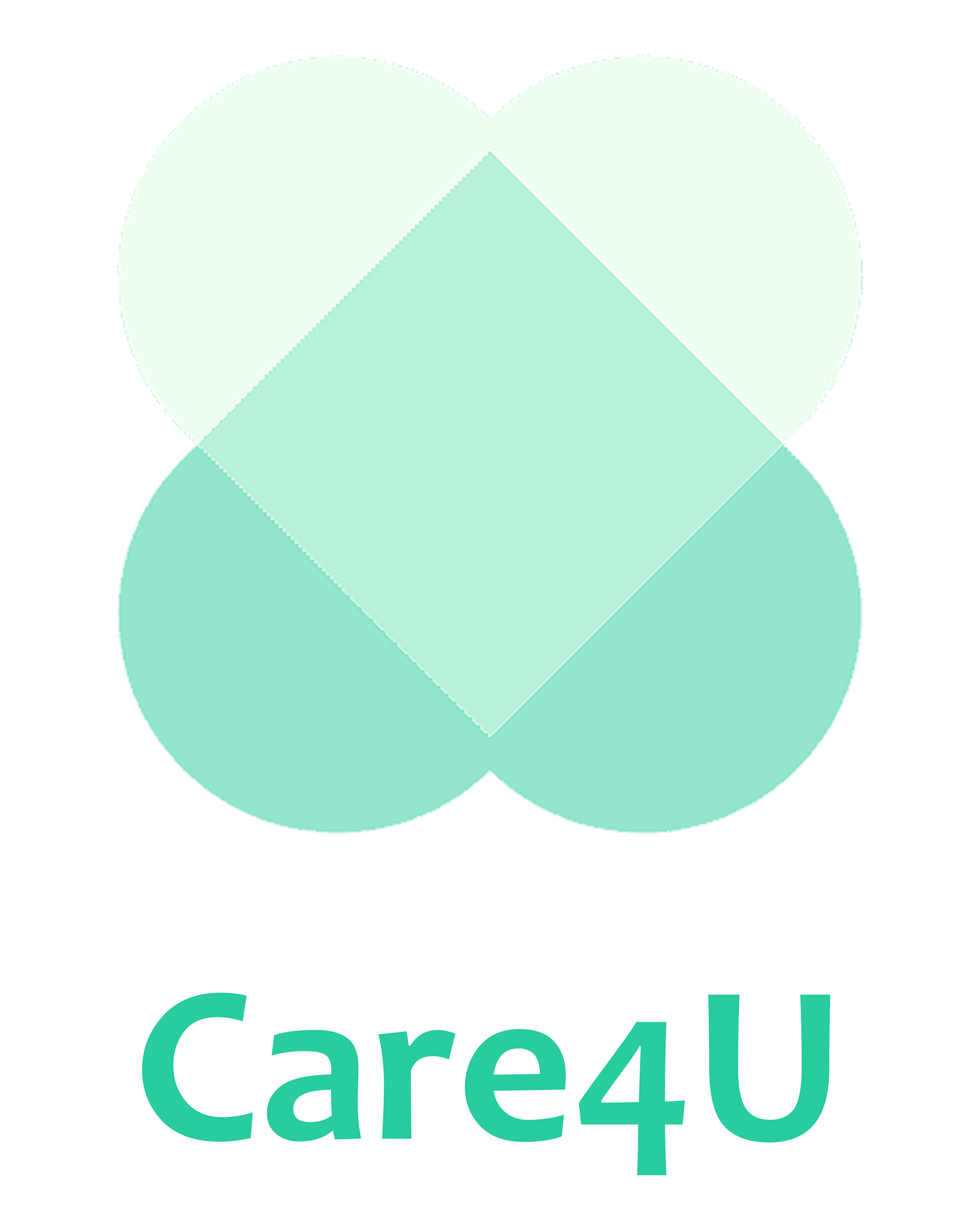
<style>
.page{position:relative;width:975px;height:1223px;background:#ffffff}
.page>*{position:absolute;margin:0}
.t1{font:226.4px "Candara-Bold";color:#28cc9e}
</style>
<div class="page">
<p class="t1" style="left:142px;top:993px;width:688px;height:183px">Care4U</p>
</div>
